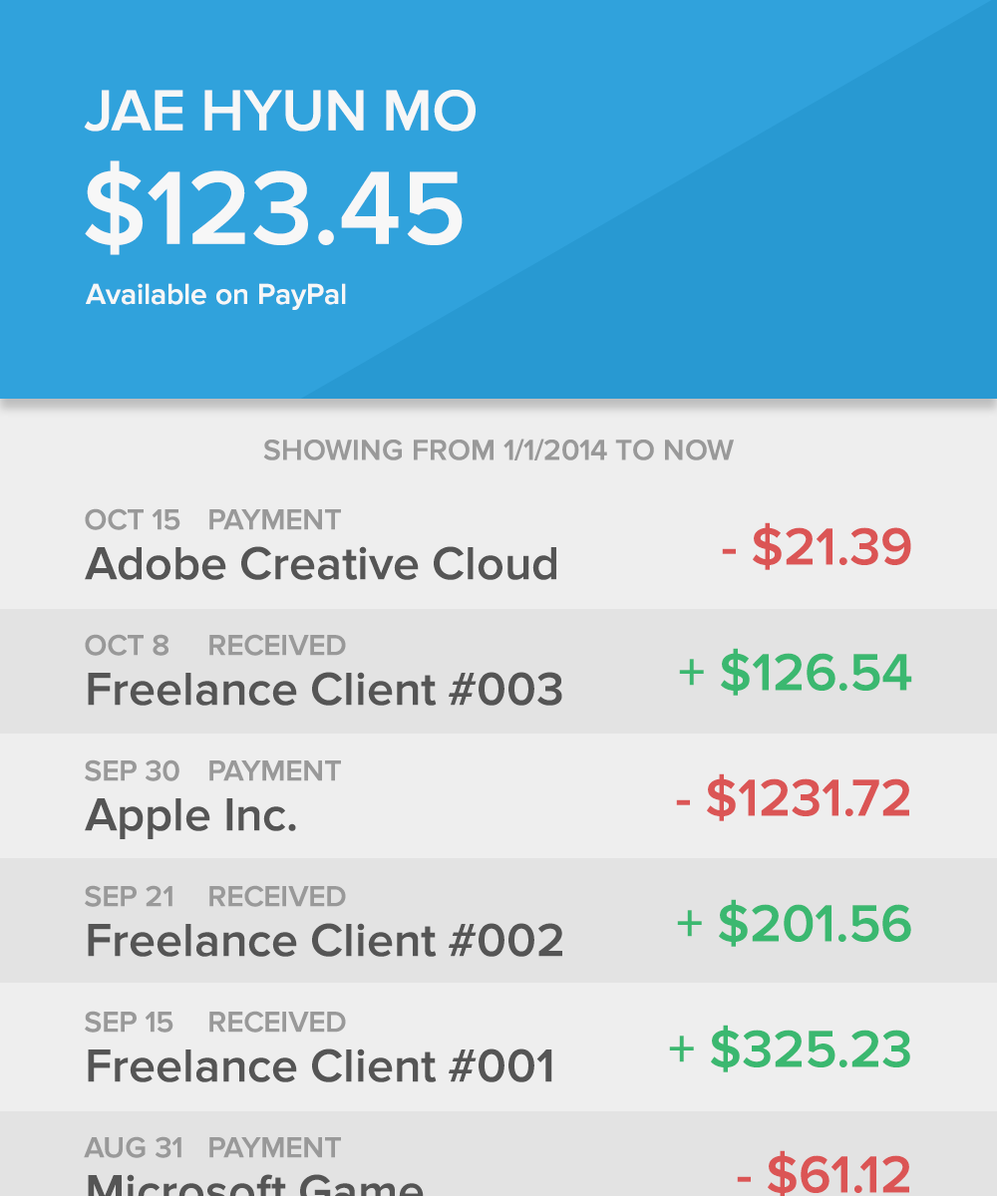
<style>
.page{position:relative;width:997px;height:1196px;background:#eeeeee}
.page>*{position:absolute;margin:0}
.t1{font:59.8px "ProximaNova-Semibold";color:#f7f7f7}
.t2{font:107.7px "ProximaNova-Semibold";color:#f7f7f7}
.t3{font:29.9px "ProximaNova-Semibold";color:#f7f7f7}
.t4{font:29.9px "ProximaNova-Semibold";color:#999999}
.t5{font:53.8px "ProximaNova-Semibold";color:#db5555}
.t6{font:47.8px "ProximaNova-Semibold";color:#555555}
.t7{font:53.8px "ProximaNova-Semibold";color:#3bb870}
</style>
<div class="page">
<p class="t1" style="left:84px;top:90px;width:391px;height:42px">JAE HYUN MO</p>
<p class="t2" style="left:85px;top:160px;width:378px;height:95px">$123.45</p>
<p class="t3" style="left:86px;top:283px;width:260px;height:27px">Available on PayPal</p>
<p class="t4" style="left:263px;top:439px;width:471px;height:22px">SHOWING FROM 1/1/2014 TO NOW</p>
<p class="t4" style="left:85px;top:508px;width:95px;height:22px">OCT 15</p>
<p class="t4" style="left:209px;top:509px;width:132px;height:21px">PAYMENT</p>
<p class="t5" style="left:722px;top:522px;width:189px;height:48px">- $21.39</p>
<p class="t6" style="left:85px;top:546px;width:471px;height:34px">Adobe Creative Cloud</p>
<p class="t4" style="left:85px;top:634px;width:83px;height:22px">OCT 8</p>
<p class="t4" style="left:209px;top:634px;width:137px;height:22px">RECEIVED</p>
<p class="t7" style="left:679px;top:648px;width:233px;height:48px">+ $126.54</p>
<p class="t6" style="left:88px;top:672px;width:474px;height:34px">Freelance Client #003</p>
<p class="t4" style="left:85px;top:760px;width:94px;height:22px">SEP 30</p>
<p class="t4" style="left:209px;top:761px;width:132px;height:21px">PAYMENT</p>
<p class="t5" style="left:676px;top:774px;width:233px;height:47px">- $1231.72</p>
<p class="t6" style="left:85px;top:798px;width:211px;height:41px">Apple Inc.</p>
<p class="t4" style="left:85px;top:885px;width:87px;height:22px">SEP 21</p>
<p class="t4" style="left:209px;top:885px;width:137px;height:22px">RECEIVED</p>
<p class="t7" style="left:677px;top:899px;width:234px;height:48px">+ $201.56</p>
<p class="t6" style="left:88px;top:923px;width:474px;height:34px">Freelance Client #002</p>
<p class="t4" style="left:85px;top:1011px;width:88px;height:22px">SEP 15</p>
<p class="t4" style="left:209px;top:1011px;width:137px;height:22px">RECEIVED</p>
<p class="t7" style="left:669px;top:1025px;width:241px;height:48px">+ $325.23</p>
<p class="t6" style="left:88px;top:1049px;width:464px;height:34px">Freelance Client #001</p>
<p class="t4" style="left:84px;top:1136px;width:97px;height:22px">AUG 31</p>
<p class="t4" style="left:209px;top:1137px;width:132px;height:21px">PAYMENT</p>
<p class="t5" style="left:737px;top:1150px;width:172px;height:48px">- $61.12</p>
</div>
